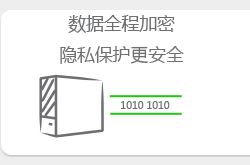
<style>
.page{position:relative;width:250px;height:165px;background:#ffffff}
.page>*{position:absolute;margin:0}
.t1{font:17.8px "MicrosoftYaHei";color:#6e6f71}
.t2{font:9.9px "MicrosoftYaHei";color:#6e6f71}
</style>
<div class="page">
<p class="t1" style="left:60px;top:15px;width:124px;height:49px;text-align:center">数据全程加密<br>隐私保护更安全</p>
<p class="t2" style="left:121px;top:101px;width:49px;height:8px">1010 1010</p>
</div>
